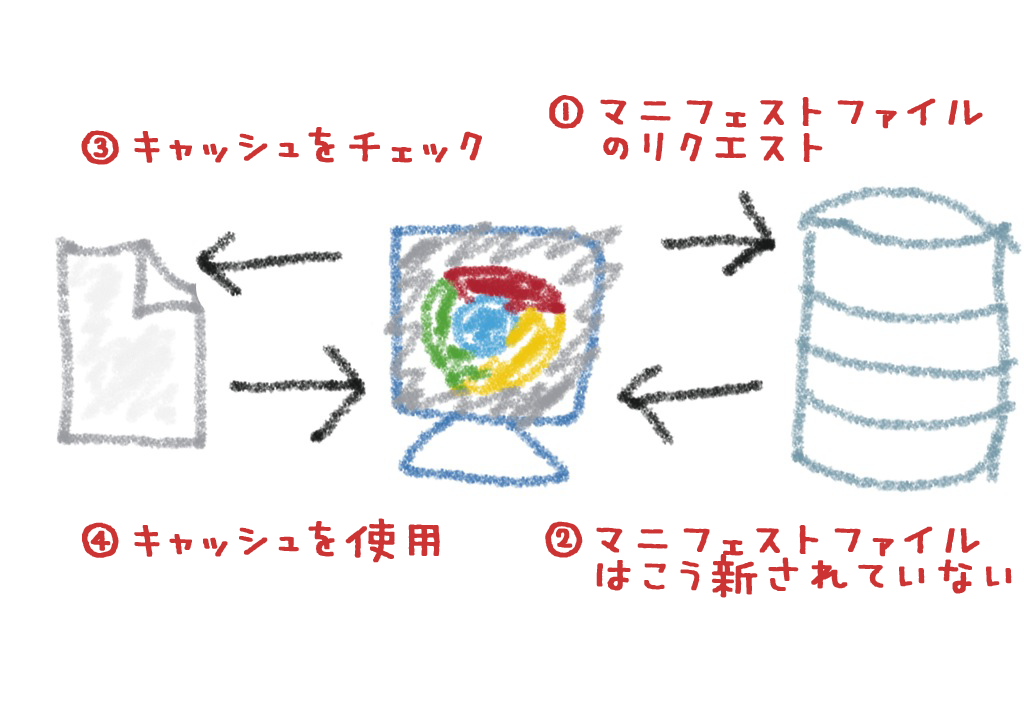
<style>
.page{position:relative;width:1024px;height:718px;background:#ffffff}
.page>*{position:absolute;margin:0}
.t1{font:72px/36px "MiuraLiner-Jr";color:#cc3434;font-weight:bold}
.t2{font:72px "MiuraLiner-Jr";color:#cc3434;font-weight:bold}
</style>
<div class="page">
<p class="t1" style="left:549px;top:95px;width:434px;height:67px;text-align:center">①マニフェストファイル<br>  のリクエスト</p>
<p class="t2" style="left:81px;top:127px;width:401px;height:38px">③キャッシュをチェック</p>
<p class="t2" style="left:82px;top:518px;width:358px;height:45px">④キャッシュを使用</p>
<p class="t1" style="left:545px;top:521px;width:467px;height:77px;text-align:center">②マニフェストファイル<br>      はこう新されていない</p>
</div>
